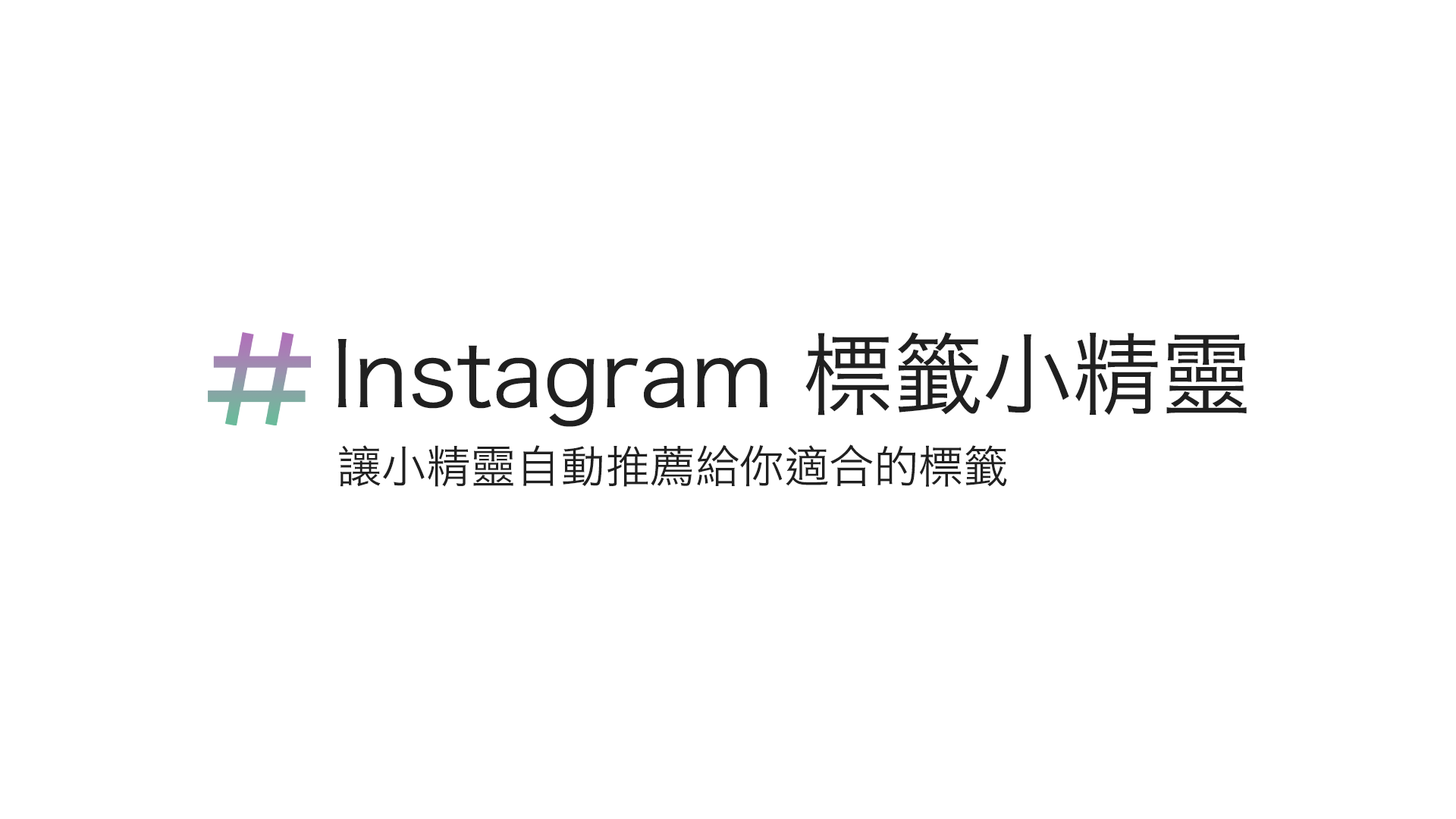
<style>
.page{position:relative;width:1456px;height:819px;background:#ffffff}
.page>*{position:absolute;margin:0}
.t1{font:89.5px "HiraginoSansCNS-W3";color:#202020}
.t2{font:44.8px "HiraginoSansCNS-W3";color:#202020}
</style>
<div class="page">
<p class="t1" style="left:337px;top:332px;width:910px;height:95px">Instagram 標籤小精靈</p>
<p class="t2" style="left:339px;top:444px;width:668px;height:43px">讓小精靈自動推薦給你適合的標籤</p>
</div>
